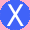
<style>
.page{position:relative;width:30px;height:30px;background:#4063f8}
.page>*{position:absolute;margin:0}
.t1{font:30px "DejaVuSansCondensed";color:#ffffff}
</style>
<div class="page">
<p class="t1" style="left:7px;top:4px;width:17px;height:22px">X</p>
</div>
